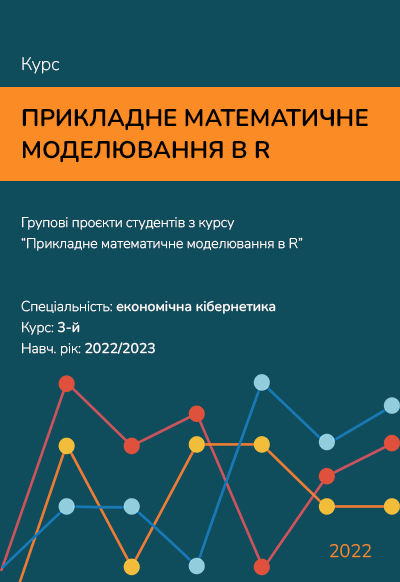
<style>
.page{position:relative;width:400px;height:582px;background:#0f4c5c}
.page>*{position:absolute;margin:0}
.t1{font:18px "Nunito-ExtraLight";color:#ffffff}
.t2{font:24px/32px "Nunito-Bold";color:#000000;text-transform:uppercase}
.t3{font:14px/21px "Nunito-ExtraLight";color:#ffffff}
.t4{font:14px/21px "Nunito-Medium";color:#ffffff}
.t5{font:18px "Nunito-Light";color:#fb8b24;text-transform:uppercase}
</style>
<div class="page">
<p class="t1" style="left:22px;top:57px;width:38px;height:17px">Курс</p>
<p class="t2" style="left:22px;top:109px;width:346px;height:54px">ПРИКЛАДНЕ Математичне моделювання в R</p>
<p class="t3" style="left:21px;top:217px;width:282px;height:139px">Групові проєкти студентів з курсу <br>“Прикладне математичне моделювання в R” <br><br><br>Спеціальність: <span class="t4">економічна кібернетика<br></span>Курс: <span class="t4">3-й<br></span>Навч. рік: <span class="t4">2022/2023</span></p>
<p class="t5" style="left:330px;top:544px;width:42px;height:14px">2022</p>
</div>
